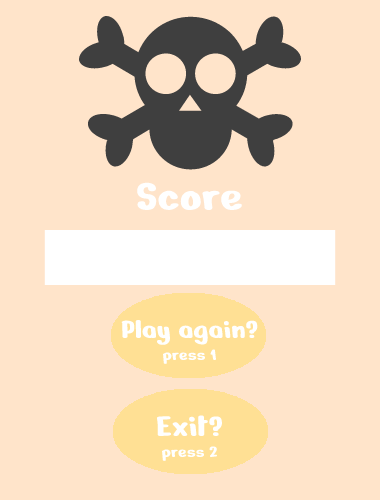
<style>
.page{position:relative;width:380px;height:500px;background:#ffe4ca}
.page>*{position:absolute;margin:0}
.t1{font:47px "NerkoOne-Regular";color:#ffffff}
.t2{font:30px "NerkoOne-Regular";color:#ffffff}
.t3{font:18px "NerkoOne-Regular";color:#ffffff}
.t4{font:34px "NerkoOne-Regular";color:#ffffff}
</style>
<div class="page">
<p class="t1" style="left:137px;top:182px;width:105px;height:29px">Score</p>
<p class="t2" style="left:121px;top:319px;width:137px;height:45px;text-align:center">Play again?<br><span class="t3">press 1</span></p>
<p class="t3" style="left:156px;top:415px;width:67px;height:46px;text-align:center"><span class="t4">Exit?<br></span>press 2</p>
</div>
